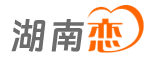
<style>
.page{position:relative;width:162px;height:60px;background:#ffffff}
.page>*{position:absolute;margin:0}
.t1{font:37.5px "DingTalk-JinBuTi";color:#6c6c6c;font-weight:bold}
</style>
<div class="page">
<p class="t1" style="left:11px;top:19px;width:73px;height:33px">湖南</p>
</div>
